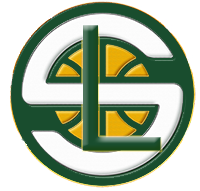
<style>
.page{position:relative;width:200px;height:191px;background:#ffffff}
.page>*{position:absolute;margin:0}
.t1{font:177.3px "DokChampa"}
</style>
<div class="page">
<p class="t1" style="left:82px;top:24px;width:80px;height:128px">L</p>
</div>
